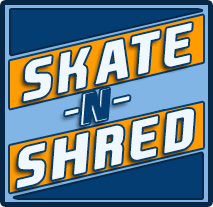
<style>
.page{position:relative;width:213px;height:207px;background:#033d71}
.page>*{position:absolute;margin:0}
.t1{font:54.1px/37px "EASPORTS";letter-spacing:0.08em;color:#eff7ff;scale:1.08 1}
.t2{font:54.1px/38px "EASPORTS";letter-spacing:0.07em;color:#eff7ff;scale:1.08 1}
.t3{font:54.1px/38px "EASPORTS";letter-spacing:-0.05em;color:#eff7ff;scale:1.08 1}
.t4{font:54.1px/38px "EASPORTS";letter-spacing:0.05em;color:#eff7ff;scale:1.08 1}
.t5{font:54.1px/37px "DevanagariSangamMN";color:#eff7ff;scale:1.08 1}
.t6{font:42px/37px "EASPORTS";color:#eff7ff;scale:1.08 1}
.t7{font:54.1px/37px "DevanagariMT";color:#eff7ff;scale:1.08 1}
</style>
<div class="page">
<p class="t1" style="left:17px;top:23px;width:177px;height:165px;rotate:-13deg"><span class="t2">Sk</span><span class="t3">a</span><span class="t4">te<br>  </span><span class="t5">-</span><span class="t6">N</span><span class="t7">-<br></span>Shred</p>
</div>
